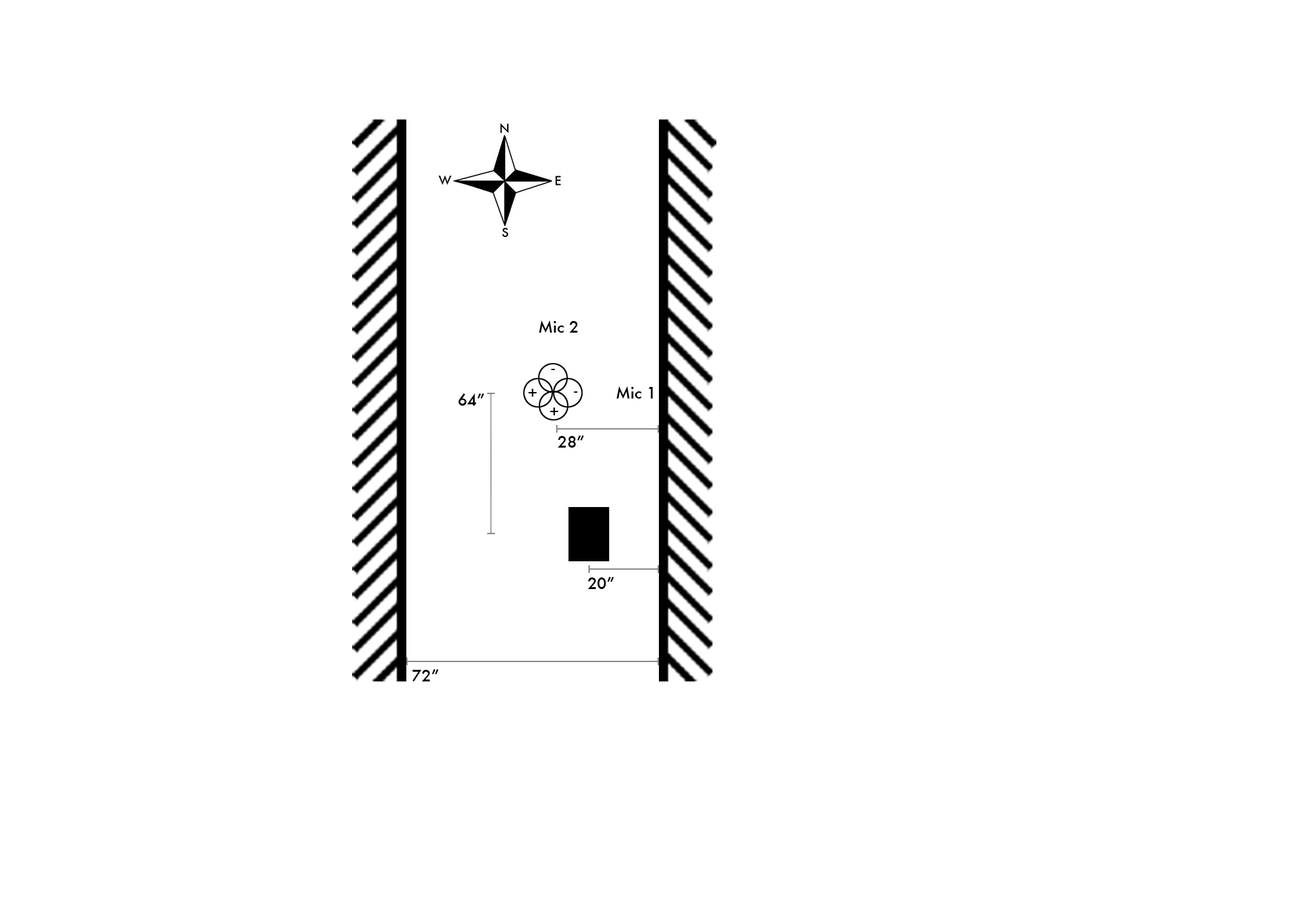
<style>
.page{position:relative;width:1292px;height:923px;background:#ffffff}
.page>*{position:absolute;margin:0}
.t1{font:15.5px "Futura-Medium";color:#000000}
</style>
<div class="page">
<p class="t1" style="left:539px;top:320px;width:38px;height:13px">Mic 2</p>
<p class="t1" style="left:551px;top:369px;width:4px;height:1px">-</p>
<p class="t1" style="left:528px;top:389px;width:9px;height:8px">+</p>
<p class="t1" style="left:616px;top:386px;width:37px;height:13px">Mic 1</p>
<p class="t1" style="left:458px;top:393px;width:26px;height:13px">64”</p>
<p class="t1" style="left:574px;top:391px;width:3px;height:2px">-</p>
<p class="t1" style="left:550px;top:408px;width:9px;height:7px">+</p>
<p class="t1" style="left:557px;top:435px;width:27px;height:13px">28”</p>
<p class="t1" style="left:588px;top:577px;width:26px;height:12px">20”</p>
<p class="t1" style="left:412px;top:669px;width:27px;height:12px">72”</p>
</div>
